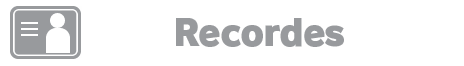
<style>
.page{position:relative;width:464px;height:66px;background:#ffffff}
.page>*{position:absolute;margin:0}
.t1{font:36px "RodinPro-UB";letter-spacing:-0.039em;color:#989a9d}
</style>
<div class="page">
<p class="t1" style="left:176px;top:18px;width:168px;height:29px">Recordes</p>
</div>
